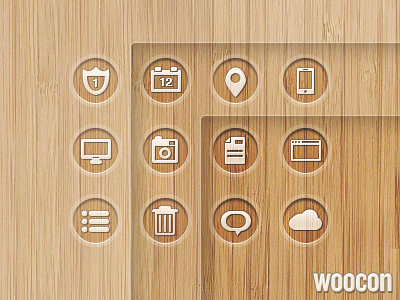
<style>
.page{position:relative;width:400px;height:300px}
.page>*{position:absolute;margin:0}
.t1{font:12px "HelveticaNeue-Bold";letter-spacing:-0.02em;color:#fefefd}
.t2{font:36px "Knockout-HTF49-Liteweight";letter-spacing:-0.02em;color:#f2e8d9}
</style>
<div class="page">
<p class="t1" style="left:160px;top:78px;width:12px;height:8px">12</p>
<p class="t1" style="left:93px;top:79px;width:4px;height:8px">1</p>
<p class="t2" style="left:313px;top:273px;width:79px;height:19px">woocon</p>
</div>
